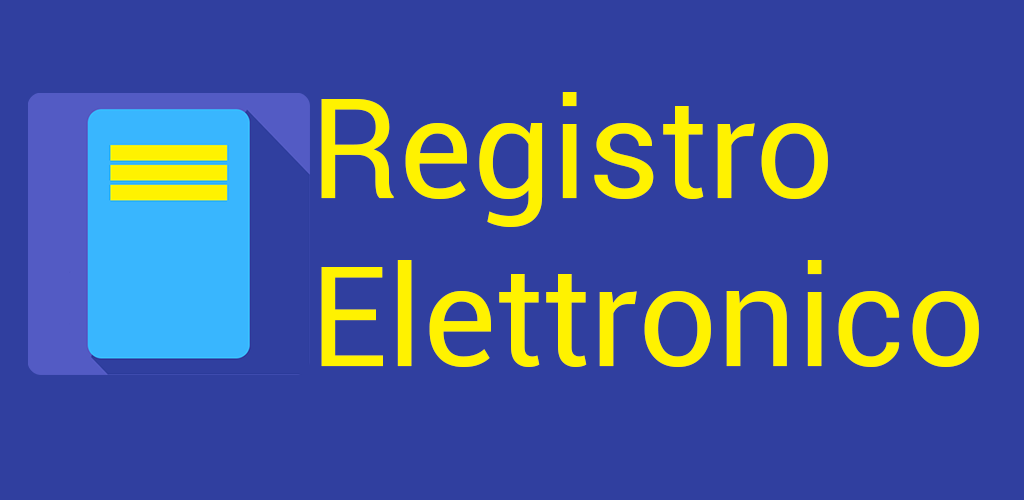
<style>
.page{position:relative;width:1024px;height:500px;background:#303f9f}
.page>*{position:absolute;margin:0}
.t1{font:140px "Roboto-Regular";color:#fff200}
</style>
<div class="page">
<p class="t1" style="left:321px;top:92px;width:658px;height:275px">Registro<br>Elettronico</p>
</div>
